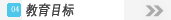
<style>
.page{position:relative;width:171px;height:20px;background:#ffffff}
.page>*{position:absolute;margin:0}
.t1{font:14px "New-Gulim";color:#3f3f3f;font-weight:bold;font-style:italic;scale:0.85 1}
</style>
<div class="page">
<p class="t1" style="left:26px;top:3px;width:48px;height:14px">教育目标</p>
</div>
